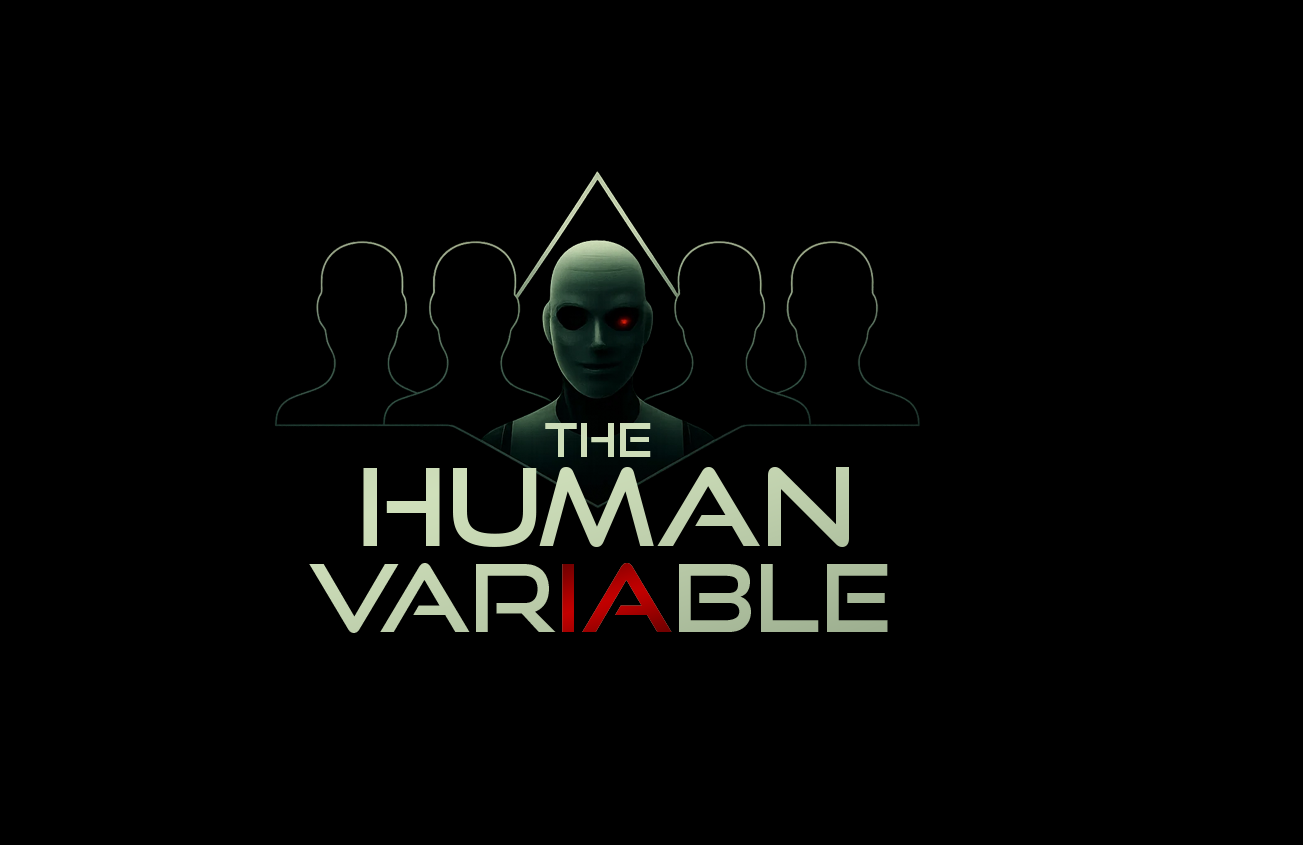
<style>
.page{position:relative;width:1303px;height:845px;background:#000000}
.page>*{position:absolute;margin:0}
.t1{font:46.5px "GoodTimesRg-Regular";color:#cedeb9}
.t2{font:106.7px "GoodTimesRg-Regular";color:#c6d6b3}
.t3{font:92.9px "GoodTimesRg-Regular";color:#b4c09f}
</style>
<div class="page">
<p class="t1" style="left:545px;top:423px;width:106px;height:34px">THE</p>
<p class="t2" style="left:363px;top:467px;width:486px;height:80px">Human</p>
<p class="t3" style="left:309px;top:563px;width:579px;height:70px">VARIABLE</p>
</div>
